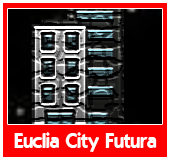
<style>
.page{position:relative;width:170px;height:160px;background:#ff0000}
.page>*{position:absolute;margin:0}
.t1{font:20px "ELEGANCE";color:#ffffff}
</style>
<div class="page">
<p class="t1" style="left:14px;top:132px;width:143px;height:20px">Euclia City Futura</p>
</div>
